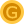
<style>
.page{position:relative;width:24px;height:24px;background:#ffc843}
.page>*{position:absolute;margin:0}
.t1{font:16px "Verdana";color:#ffc843}
</style>
<div class="page">
<p class="t1" style="left:6px;top:6px;width:11px;height:13px">G</p>
</div>
